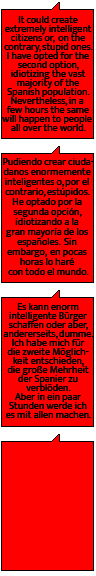
<style>
.page{position:relative;width:96px;height:576px;background:#ff0000}
.page>*{position:absolute;margin:0}
.t1{font:10px/9px "MuktaVaani-Regular";color:#000000}
.t2{font:10px/10px "MuktaVaani-Regular";color:#000000}
</style>
<div class="page">
<p class="t1" style="left:2px;top:16px;width:92px;height:402px;text-align:center">It could create<br>extremely intelligent<br>citizens or,  on the<br>contrary, stupid ones.<br>I have opted for the<br>second option,<br>idiotizing the vast<br>majority of the<br>Spanish population.<br>Nevertheless, in a <br>few hours the same<br>will happen to people <br>all over the world.<br><br><br><span class="t2">Pudiendo crear ciuda-<br>danos enormemente <br>inteligentes o, por el <br>contrario, estúpidos. <br>He optado por la <br>segunda opción, <br>idiotizando a la <br>gran mayoría de los <br>españoles.  Sin <br>embargo,  en pocas <br>horas lo haré <br>con todo el mundo.<br><br><br></span>Es kann enorm<br>intelligente Bürger<br>schaffen oder aber,<br>andererseits, dumme.<br>Ich habe mich für<br>die zweite Möglich-<br>keit entschieden,<br>die große Mehrheit<br>der Spanier zu<br>verblöden.<br>Aber in ein paar<br>Stunden werde ich<br>es mit allen machen.</p>
</div>
